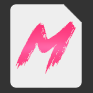
<style>
.page{position:relative;width:93px;height:93px;background:#eeeeee}
.page>*{position:absolute;margin:0}
.t1{font:62.6px "RoadRage";color:#fe4e8f}
</style>
<div class="page">
<p class="t1" style="left:15px;top:21px;width:61px;height:53px">m</p>
</div>
